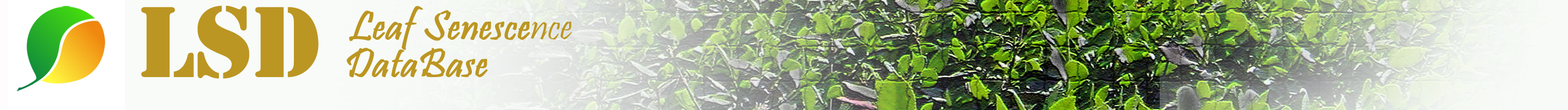
<style>
.page{position:relative;width:1568px;height:110px}
.page>*{position:absolute;margin:0}
.t1{font:93.9px "StencilStd";color:#bc9623}
.t2{font:41.7px "Pristina-Regular";color:#bc9623;font-weight:bold}
.t3{font:41.7px "Pristina-Regular";color:#bc9623}
</style>
<div class="page">
<p class="t1" style="left:141px;top:5px;width:178px;height:74px">LSD</p>
<p class="t2" style="left:349px;top:6px;width:223px;height:44px">Leaf Senesce<span class="t3">nce</span></p>
<p class="t2" style="left:347px;top:48px;width:141px;height:30px">DataBase</p>
</div>
